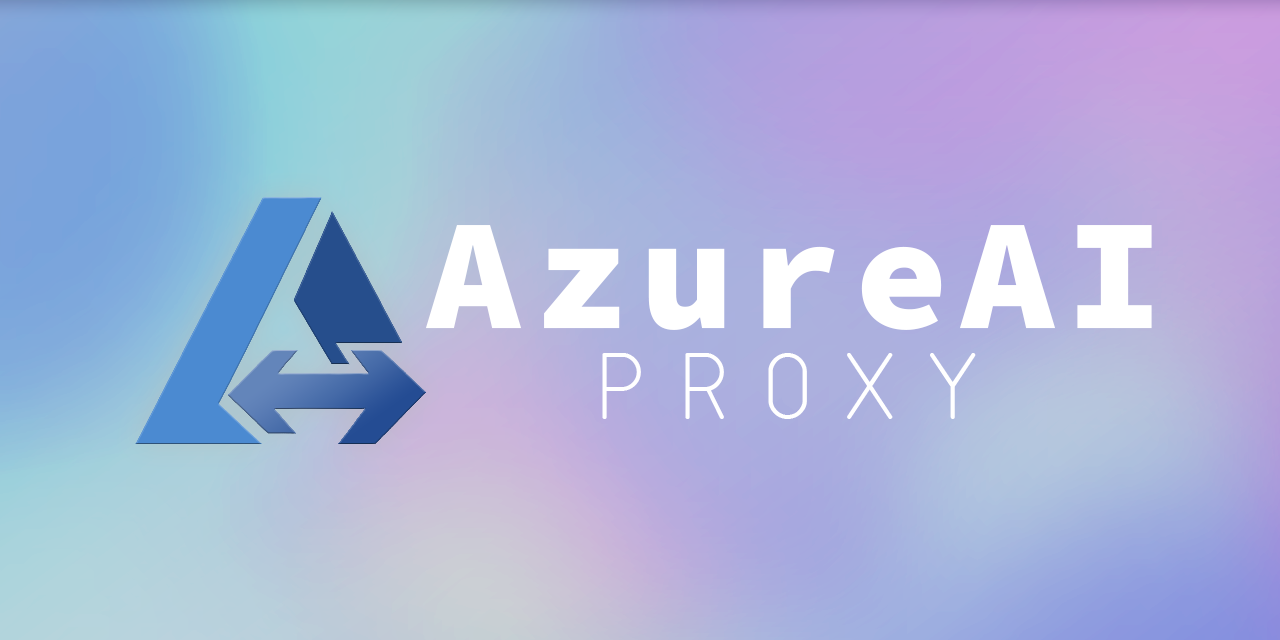
<style>
.page{position:relative;width:1280px;height:640px}
.page>*{position:absolute;margin:0}
.t1{font:158.4px "SourceCodePro-Black";letter-spacing:0.075em;color:#ffffff}
.t2{font:98px "SWIsot2";letter-spacing:0.075em;color:#ffffff}
</style>
<div class="page">
<p class="t1" style="left:426px;top:225px;width:726px;height:105px">AzureAI</p>
<p class="t2" style="left:602px;top:353px;width:374px;height:66px">PROXY</p>
</div>
